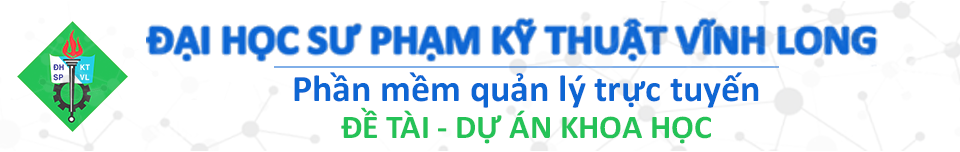
<style>
.page{position:relative;width:960px;height:152px;background:#ffffff}
.page>*{position:absolute;margin:0}
.t1{font:37.7px "Calibri-Bold";color:#0e66d3}
.t2{font:33.3px "Calibri-Bold";color:#24c257}
</style>
<div class="page">
<p class="t1" style="left:294px;top:72px;width:465px;height:36px">Phần mềm quản lý trực tuyến</p>
<p class="t2" style="left:341px;top:107px;width:370px;height:37px">ĐỀ TÀI - DỰ ÁN KHOA HỌC</p>
</div>
